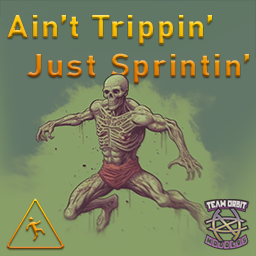
<style>
.page{position:relative;width:256px;height:256px}
.page>*{position:absolute;margin:0}
.t1{font:32.5px "Bahnschrift-Bold";letter-spacing:0.075em;font-weight:bold}
</style>
<div class="page">
<p class="t1" style="left:7px;top:15px;width:242px;height:69px;text-align:center">Ain’t Trippin’        <br>     Just Sprintin’</p>
</div>
